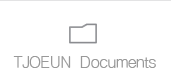
<style>
.page{position:relative;width:171px;height:80px;background:#ffffff}
.page>*{position:absolute;margin:0}
.t1{font:16px "Haansoft-Dotum";letter-spacing:-0.05em;color:#999999}
</style>
<div class="page">
<p class="t1" style="left:13px;top:56px;width:143px;height:12px">TJOEUN  Documents</p>
</div>
